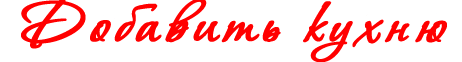
<style>
.page{position:relative;width:462px;height:62px;background:#ffffff}
.page>*{position:absolute;margin:0}
.t1{font:63px "VeraCrouz";letter-spacing:0.075em;color:#ff0000;font-weight:bold;scale:1.11 1}
</style>
<div class="page">
<p class="t1" style="left:21px;top:0px;width:426px;height:63px">Добавить кухню</p>
</div>
